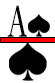
<style>
.page{position:relative;width:55px;height:83px;background:#ffffff}
.page>*{position:absolute;margin:0}
.t1{font:42px "DFKaiShu-SB-Estd-BF";color:#000000}
</style>
<div class="page">
<p class="t1" style="left:7px;top:5px;width:20px;height:32px">A</p>
</div>
